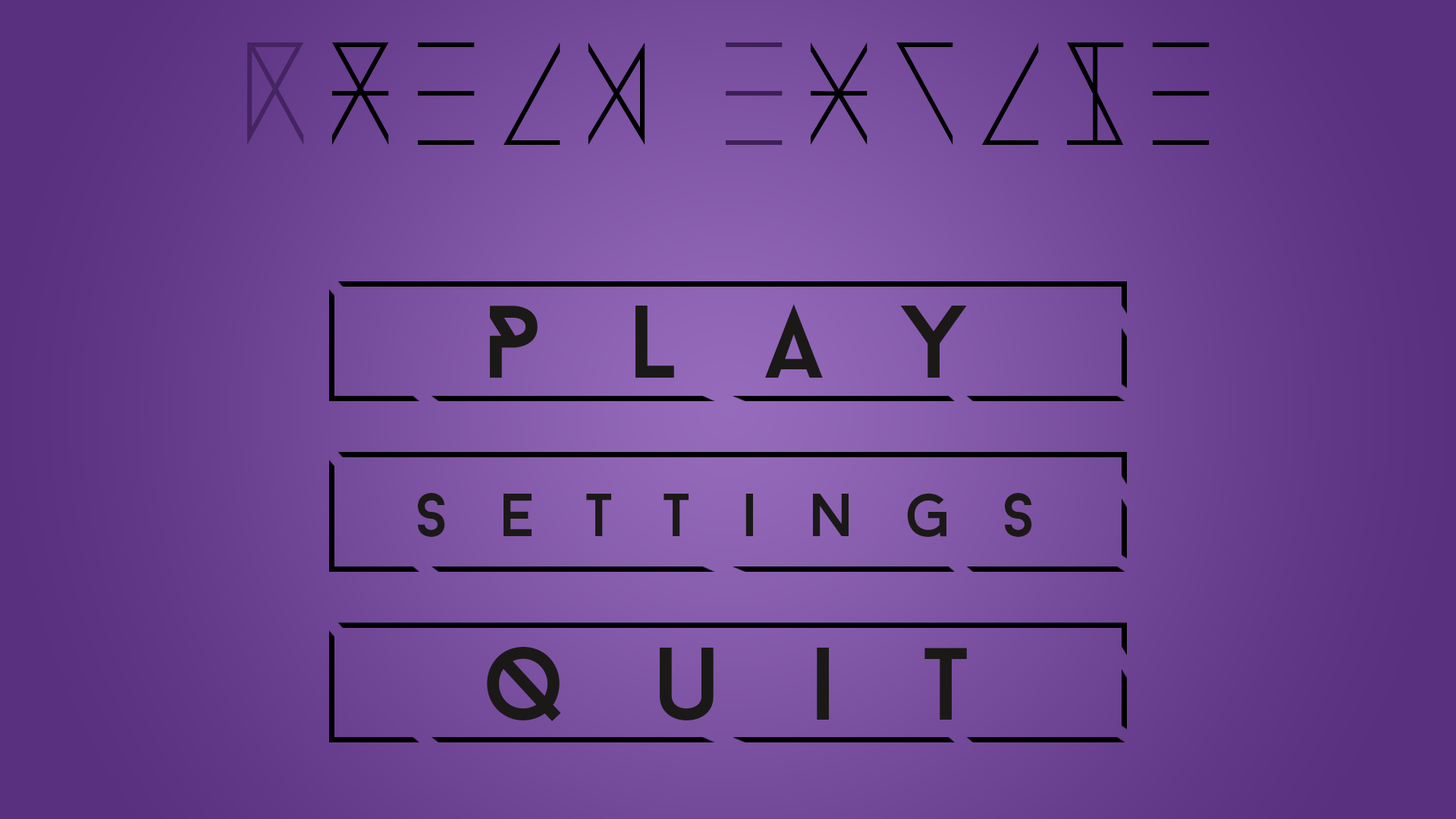
<style>
.page{position:relative;width:1456px;height:819px}
.page>*{position:absolute;margin:0}
.t1{font:102.6px "AdventureAlphabet";color:#000000}
.t2{font:102.6px "AdventureAlphabet";color:#442461}
.t3{font:102.6px "AdventureAlphabet";color:#3d2057}
.t4{font:102.6px "BaronNeue";letter-spacing:0.841em;color:#1b1917}
.t5{font:60.4px "BaronNeue";letter-spacing:0.841em;color:#1b1917}
</style>
<div class="page">
<p class="t1" style="left:247px;top:42px;width:963px;height:103px"><span class="t2">D</span>ream <span class="t3">E</span>scape</p>
<p class="t4" style="left:490px;top:304px;width:477px;height:74px">Play</p>
<p class="t5" style="left:418px;top:493px;width:614px;height:44px">Settings</p>
<p class="t4" style="left:487px;top:647px;width:480px;height:74px">Quit</p>
</div>
